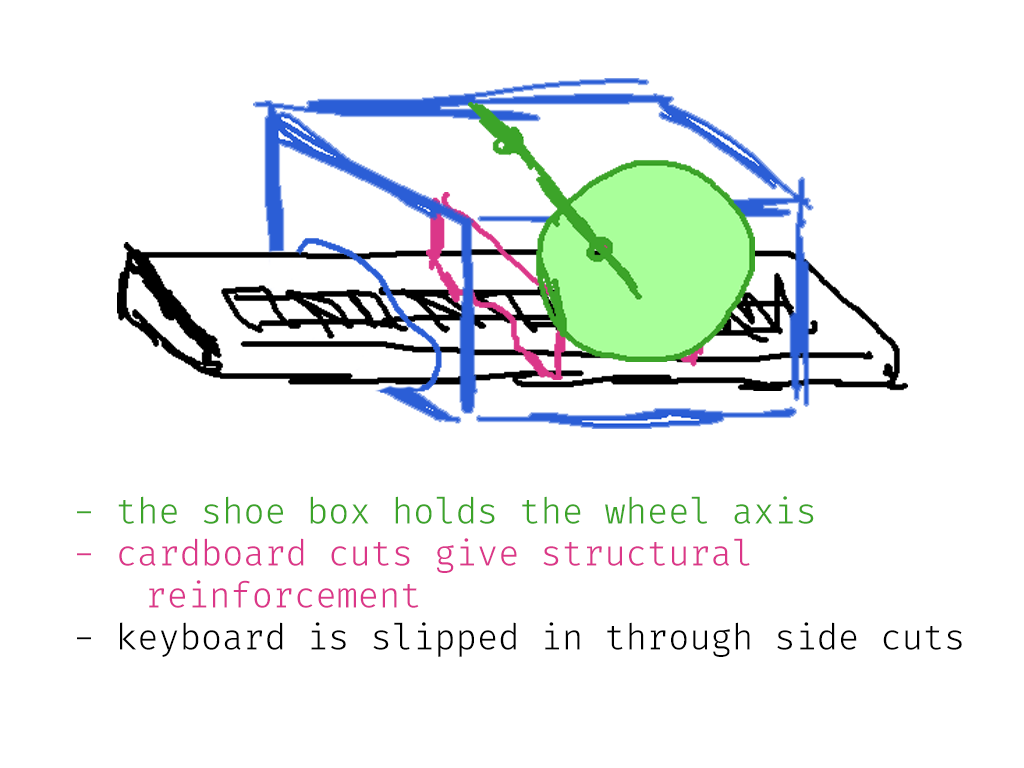
<style>
.page{position:relative;width:1024px;height:768px;background:#ffffff}
.page>*{position:absolute;margin:0}
.t1{font:36px/42px "FiraCode-Light";letter-spacing:-0.01em;color:#db3789}
.t2{font:36px/42px "FiraCode-Light";letter-spacing:-0.01em;color:#3ca429}
.t3{font:36px/42px "FiraCode-Light";letter-spacing:-0.01em;color:#000000}
</style>
<div class="page">
<p class="t1" style="left:77px;top:496px;width:885px;height:161px"><span class="t2">- the shoe box holds the wheel axis <br></span>- cardboard cuts give structural <br>  reinforcement<br><span class="t3">- keyboard is slipped in through side cuts</span></p>
</div>
